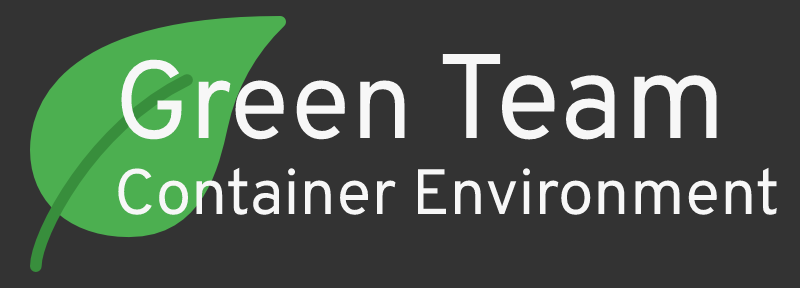
<style>
.page{position:relative;width:800px;height:288px;background:#333333}
.page>*{position:absolute;margin:0}
.t1{font:64px "Overpass-Regular";color:#f7f7f7}
.t2{font:110px "Overpass-Regular";color:#f7f7f7}
.t3{font:120px "Overpass-Regular";color:#f7f7f7}
</style>
<div class="page">
<p class="t1" style="left:118px;top:53px;width:659px;height:162px"><span class="t2">Green </span><span class="t3">Team </span>Container Environment</p>
</div>
